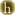
<style>
.page{position:relative;width:15px;height:15px}
.page>*{position:absolute;margin:0}
.t1{font:15.3px "AGaramondPro-Regular";letter-spacing:0.015em;color:#ffffff;scale:0.95 1}
</style>
<div class="page">
<p class="t1" style="left:3px;top:2px;width:8px;height:11px">h</p>
</div>
